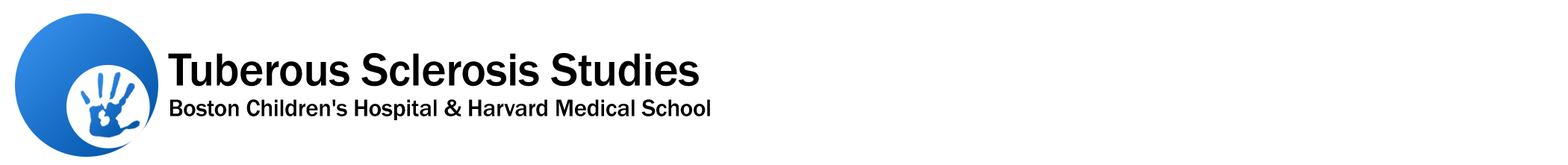
<style>
.page{position:relative;width:1568px;height:165px;background:#ffffff}
.page>*{position:absolute;margin:0}
.t1{font:24.7px/30.6px "FranklinGothicURW-Med";letter-spacing:-0.01em;color:#000000}
.t2{font:47.8px/44.1px "FranklinGothicURW-Med";letter-spacing:-0.01em;color:#000000}
</style>
<div class="page">
<p class="t1" style="left:168px;top:53px;width:542px;height:67px"><span class="t2">Tuberous Sclerosis Studies<br></span>Boston Children's Hospital &amp; Harvard Medical School</p>
</div>
